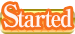
<style>
.page{position:relative;width:75px;height:34px;background:#f6701d}
.page>*{position:absolute;margin:0}
.t1{font:24px "RyuminPro-ExBold";letter-spacing:-0.08em;color:#fff5f0;scale:0.9 1}
.t2{font:30px "RyuminPro-ExBold";letter-spacing:-0.08em;color:#fff5f0;scale:0.9 1}
</style>
<div class="page">
<p class="t1" style="left:3px;top:4px;width:69px;height:24px"><span class="t2">S</span>tarted</p>
</div>
